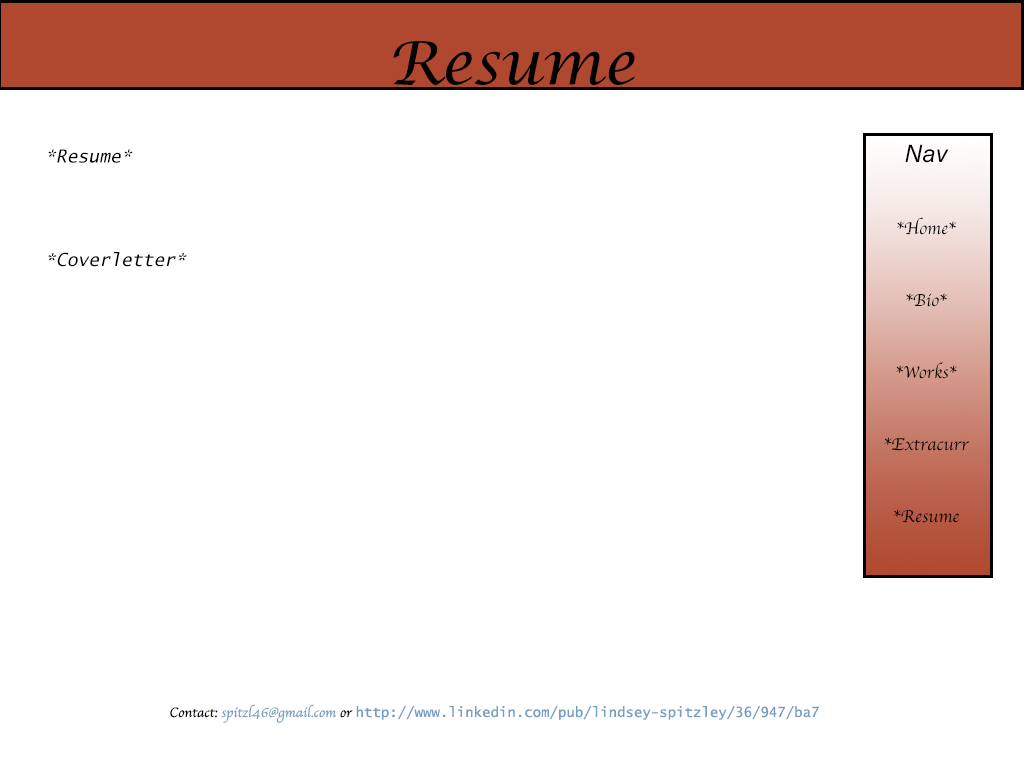
<style>
.page{position:relative;width:1024px;height:768px;background:#ffffff}
.page>*{position:absolute;margin:0}
.t1{font:60px "LucidaCalligraphy-Italic";color:#000000}
.t2{font:18px "LucidaSans-TypewriterOblique";color:#000000}
.t3{font:18px/24px "Apple-Chancery";color:#000000}
.t4{font:24px/24px "Arial-ItalicMT";color:#000000}
.t5{font:14px "LucidaSans-Typewriter";color:#779dc1}
.t6{font:14px "Apple-Chancery";color:#000000}
.t7{font:14px "Apple-Chancery";color:#779dc1}
</style>
<div class="page">
<p class="t1" style="left:393px;top:41px;width:242px;height:44px">Resume</p>
<p class="t2" style="left:48px;top:149px;width:85px;height:14px">*Resume*</p>
<p class="t3" style="left:884px;top:144px;width:86px;height:379px;text-align:center"><span class="t4"><br>Nav<br></span><br><br>*Home*<br><br><br>*Bio*<br><br><br>*Works*<br><br><br>*Extracurr<br><br><br>*Resume</p>
<p class="t2" style="left:48px;top:252px;width:139px;height:15px">*Coverletter*</p>
<p class="t5" style="left:170px;top:704px;width:649px;height:19px"><span class="t6">Contact: </span><span class="t7">spitzl46@gmail.com</span><span class="t6"> or </span>http://www.linkedin.com/pub/lindsey-spitzley/36/947/ba7</p>
</div>
